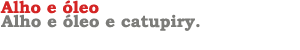
<style>
.page{position:relative;width:300px;height:50px;background:#ffffff}
.page>*{position:absolute;margin:0}
.t1{font:17px "BookmanOldStyle-Bold";color:#d42525}
.t2{font:17px "BookmanOldStyle-Bold";color:#7c7c79}
</style>
<div class="page">
<p class="t1" style="left:0px;top:0px;width:99px;height:14px">Alho e óleo</p>
<p class="t2" style="left:1px;top:14px;width:199px;height:17px">Alho e óleo e catupiry.</p>
</div>
